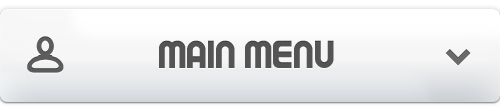
<style>
.page{position:relative;width:500px;height:111px}
.page>*{position:absolute;margin:0}
.t1{font:40px "TAPEMAN";letter-spacing:0.005em;color:#424242}
</style>
<div class="page">
<p class="t1" style="left:159px;top:40px;width:175px;height:28px">Main Menu</p>
</div>
